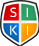
<style>
.page{position:relative;width:39px;height:46px}
.page>*{position:absolute;margin:0}
.t1{font:13.3px "SukhumvitSet-Light";color:#ffffff}
</style>
<div class="page">
<p class="t1" style="left:10px;top:7px;width:7px;height:10px">S</p>
<p class="t1" style="left:26px;top:7px;width:2px;height:10px">I</p>
<p class="t1" style="left:10px;top:25px;width:7px;height:10px">K</p>
<p class="t1" style="left:27px;top:25px;width:1px;height:10px">I</p>
</div>
